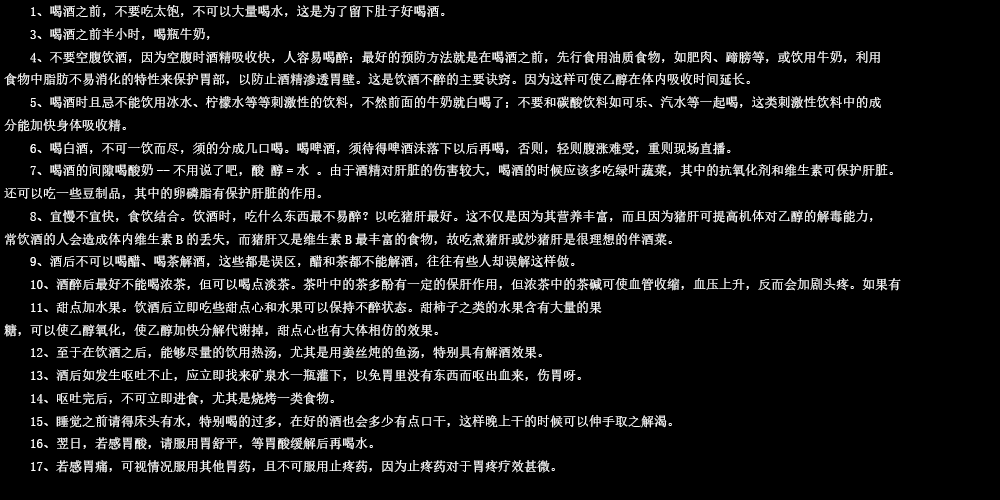
<style>
.page{position:relative;width:1000px;height:500px;background:#000000}
.page>*{position:absolute;margin:0}
.t1{font:13px "SimSun";color:#ffffff}
</style>
<div class="page">
<p class="t1" style="left:4px;top:5px;width:897px;height:468px">1、喝酒之前，不要吃太饱，不可以大量喝水，这是为了留下肚子好喝酒。 <br>　　3、喝酒之前半小时，喝瓶牛奶，<br>　　4、不要空腹饮酒，因为空腹时酒精吸收快，人容易喝醉；最好的预防方法就是在喝酒之前，先行食用油质食物，如肥肉、蹄膀等，或饮用牛奶，利用<br>食物中脂肪不易消化的特性来保护胃部，以防止酒精渗透胃壁。这是饮酒不醉的主要诀窍。因为这样可使乙醇在体内吸收时间延长。 <br>    5、喝酒时且忌不能饮用冰水、柠檬水等等刺激性的饮料，不然前面的牛奶就白喝了；不要和碳酸饮料如可乐、汽水等一起喝，这类刺激性饮料中的成<br>分能加快身体吸收精。 <br>　　6、喝白酒，不可一饮而尽，须的分成几口喝。喝啤酒，须待得啤酒沫落下以后再喝，否则，轻则腹涨难受，重则现场直播。 <br>　　7、喝酒的间隙喝酸奶--不用说了吧，酸 醇=水 。由于酒精对肝脏的伤害较大，喝酒的时候应该多吃绿叶蔬菜，其中的抗氧化剂和维生素可保护肝脏。<br>还可以吃一些豆制品，其中的卵磷脂有保护肝脏的作用。 <br>    8、宜慢不宜快，食饮结合。饮酒时，吃什么东西最不易醉？以吃猪肝最好。这不仅是因为其营养丰富，而且因为猪肝可提高机体对乙醇的解毒能力，<br>常饮酒的人会造成体内维生素B的丢失，而猪肝又是维生素B最丰富的食物，故吃煮猪肝或炒猪肝是很理想的伴酒菜。 <br>　　9、酒后不可以喝醋、喝茶解酒，这些都是误区，醋和茶都不能解酒，往往有些人却误解这样做。 <br>　　10、酒醉后最好不能喝浓茶，但可以喝点淡茶。茶叶中的茶多酚有一定的保肝作用，但浓茶中的茶碱可使血管收缩，血压上升，反而会加剧头疼。如果有<br>　　11、甜点加水果。饮酒后立即吃些甜点心和水果可以保持不醉状态。甜柿子之类的水果含有大量的果<br>糖，可以使乙醇氧化，使乙醇加快分解代谢掉，甜点心也有大体相仿的效果。 <br>　　12、至于在饮酒之后，能够尽量的饮用热汤，尤其是用姜丝炖的鱼汤，特别具有解酒效果。 <br>　　13、酒后如发生呕吐不止，应立即找来矿泉水一瓶灌下，以免胃里没有东西而呕出血来，伤胃呀。 <br>　　14、呕吐完后，不可立即进食，尤其是烧烤一类食物。 <br>　　15、睡觉之前请得床头有水，特别喝的过多，在好的酒也会多少有点口干，这样晚上干的时候可以伸手取之解渴。 <br>　　16、翌日，若感胃酸，请服用胃舒平，等胃酸缓解后再喝水。 <br>　　17、若感胃痛，可视情况服用其他胃药，且不可服用止疼药，因为止疼药对于胃疼疗效甚微。</p>
</div>
